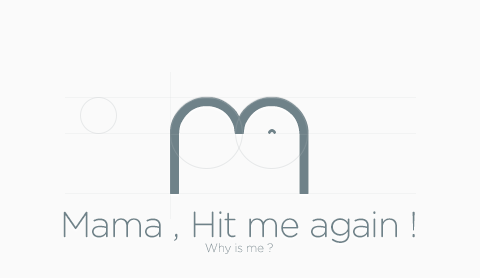
<style>
.page{position:relative;width:480px;height:278px;background:#fafafa}
.page>*{position:absolute;margin:0}
.t1{font:36px "GothamRounded-Light";letter-spacing:-0.025em;color:#6f8289}
.t2{font:128px "alberto";letter-spacing:0.005em;color:#6f8289}
.t3{font:12px "GothamRounded-Light";letter-spacing:-0.025em;color:#6f8289}
</style>
<div class="page">
<p class="t1" style="left:63px;top:97px;width:352px;height:157px;text-align:center"><span class="t2">M<br></span>Mama , Hit me again !<br><span class="t3">Why is me ?</span></p>
</div>
